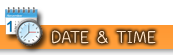
<style>
.page{position:relative;width:173px;height:55px;background:#ffffff}
.page>*{position:absolute;margin:0}
.t1{font:24px "LayijiMaHaNiYomBAOOT";color:#fee3c6}
</style>
<div class="page">
<p class="t1" style="left:52px;top:30px;width:104px;height:14px">DATE &amp; TIME</p>
</div>
